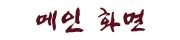
<style>
.page{position:relative;width:180px;height:40px;background:#ffffff}
.page>*{position:absolute;margin:0}
.t1{font:30px "JShinYeongBok-Regular";color:#5b0f1c}
</style>
<div class="page">
<p class="t1" style="left:36px;top:7px;width:110px;height:26px">메인 화면</p>
</div>
